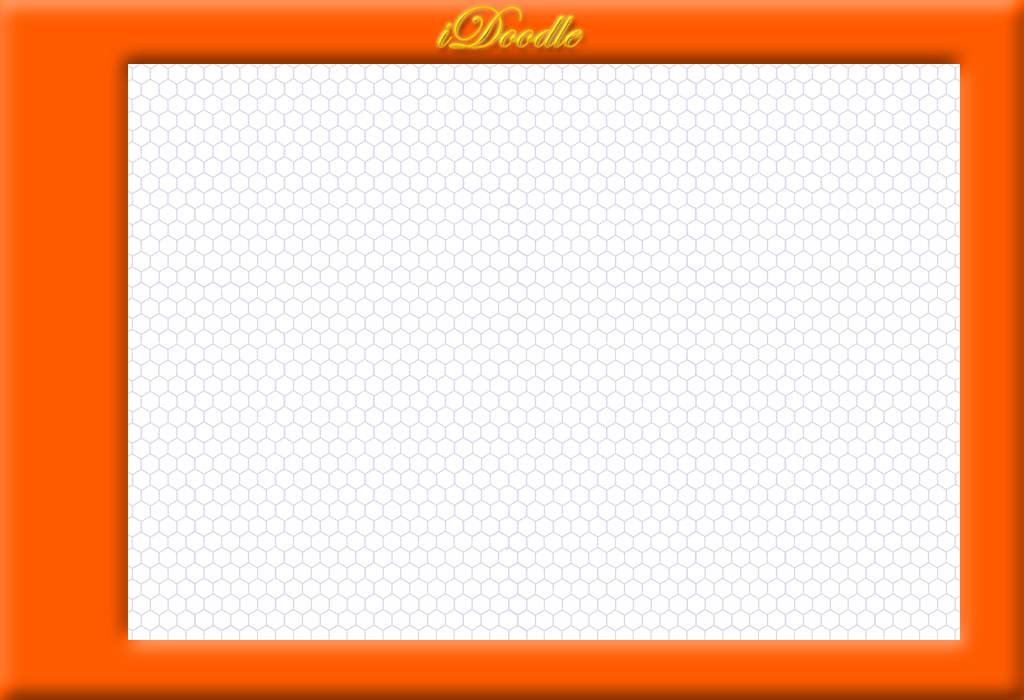
<style>
.page{position:relative;width:1024px;height:700px;background:#ffffff}
.page>*{position:absolute;margin:0}
.t1{font:60px "EdwardianScriptITC"}
</style>
<div class="page">
<p class="t1" style="left:438px;top:6px;width:145px;height:42px">iDoodle</p>
</div>
